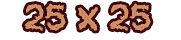
<style>
.page{position:relative;width:181px;height:40px;background:#ffffff}
.page>*{position:absolute;margin:0}
.t1{font:34px "TOBACCO";color:#c4845a;font-weight:bold}
</style>
<div class="page">
<p class="t1" style="left:24px;top:3px;width:127px;height:28px">25 X 25</p>
</div>
